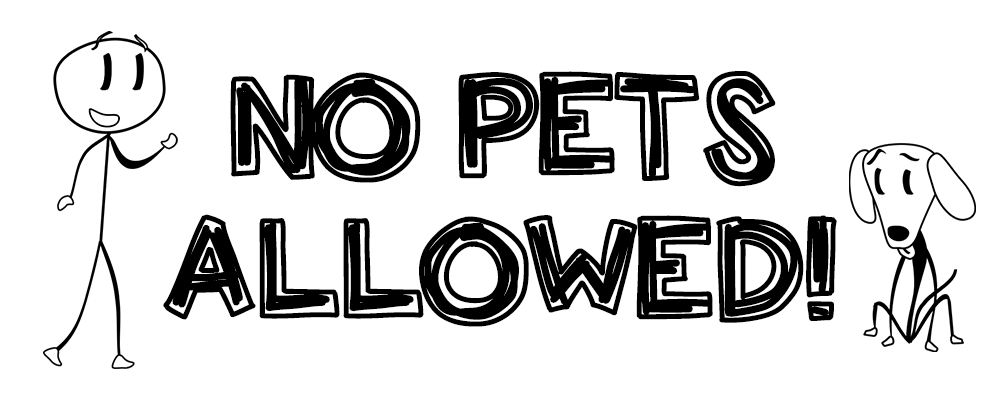
<style>
.page{position:relative;width:1000px;height:400px;background:#ffffff}
.page>*{position:absolute;margin:0}
.t1{font:120px "KBLuckyClover";color:#000000}
</style>
<div class="page">
<p class="t1" style="left:163px;top:71px;width:674px;height:256px;text-align:center">NO PETS<br>ALLOWED!</p>
</div>
